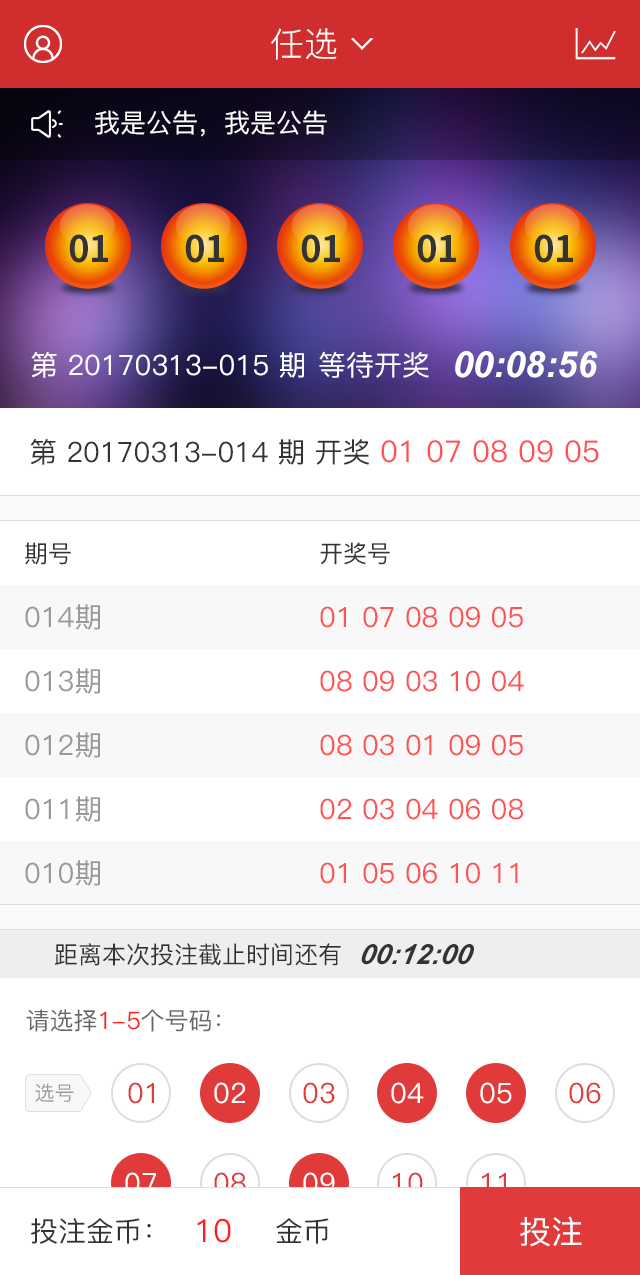
<style>
.page{position:relative;width:640px;height:1275px;background:#ffffff}
.page>*{position:absolute;margin:0}
.t1{font:34px "PingFang-SC-Regular";color:#ffffff}
.t2{font:26px "PingFang-SC-Medium";color:#ffffff}
.t3{font:36.4px "SourceHanSansCN-Bold";color:#333333}
.t4{font:28px "PingFang-SC-Medium";color:#ffffff}
.t5{font:36px "Arial-BoldItalicMT";color:#ffffff}
.t6{font:28px "PingFang-SC-Medium";color:#333333}
.t7{font:30px "PingFang-SC-Medium";color:#ff5252}
.t8{font:24px "PingFang-SC-Medium";color:#333333}
.t9{font:28px "PingFang-SC-Medium";color:#999999}
.t10{font:28px "PingFang-SC-Medium";color:#ff5252}
.t11{font:28px "Arial-BoldItalicMT";color:#333333;font-style:italic}
.t12{font:24px "PingFang-SC-Medium";color:#666666}
.t13{font:24px "PingFang-SC-Medium";color:#ff1f1f}
.t14{font:20px "PingFang-SC-Medium";color:#999999}
.t15{font:28px "PingFang-SC-Medium";color:#e03a3a}
.t16{font:28px "PingFang-SC-Medium";color:#fffefe}
.t17{font:32px "PingFang-SC-Medium";color:#ffffff}
.t18{font:32px "PingFang-SC-Medium";color:#ff1f1f}
</style>
<div class="page">
<p class="t1" style="left:271px;top:28px;width:66px;height:32px">任选</p>
<p class="t2" style="left:95px;top:110px;width:232px;height:27px">我是公告，我是公告</p>
<p class="t3" style="left:69px;top:234px;width:39px;height:29px">01</p>
<p class="t3" style="left:185px;top:234px;width:39px;height:29px">01</p>
<p class="t3" style="left:301px;top:234px;width:39px;height:29px">01</p>
<p class="t3" style="left:417px;top:234px;width:39px;height:29px">01</p>
<p class="t3" style="left:534px;top:234px;width:39px;height:29px">01</p>
<p class="t4" style="left:31px;top:351px;width:398px;height:27px">第 20170313-015 期 等待开奖</p>
<p class="t5" style="left:455px;top:351px;width:143px;height:27px">00:08:56</p>
<p class="t6" style="left:30px;top:439px;width:569px;height:26px">第 20170313-014 期 开奖 <span class="t7">01 07 08 09 05</span></p>
<p class="t8" style="left:25px;top:542px;width:46px;height:23px">期号</p>
<p class="t8" style="left:320px;top:542px;width:70px;height:23px">开奖号</p>
<p class="t9" style="left:25px;top:604px;width:75px;height:26px">014期</p>
<p class="t10" style="left:320px;top:606px;width:203px;height:22px">01 07 08 09 05</p>
<p class="t9" style="left:25px;top:668px;width:75px;height:26px">013期</p>
<p class="t10" style="left:320px;top:670px;width:204px;height:22px">08 09 03 10 04</p>
<p class="t9" style="left:25px;top:732px;width:75px;height:26px">012期</p>
<p class="t10" style="left:320px;top:734px;width:203px;height:22px">08 03 01 09 05</p>
<p class="t9" style="left:25px;top:796px;width:75px;height:26px">011期</p>
<p class="t10" style="left:320px;top:798px;width:203px;height:22px">02 03 04 06 08</p>
<p class="t9" style="left:25px;top:860px;width:75px;height:26px">010期</p>
<p class="t10" style="left:320px;top:862px;width:198px;height:22px">01 05 06 10 11</p>
<p class="t8" style="left:55px;top:943px;width:286px;height:23px">距离本次投注截止时间还有</p>
<p class="t11" style="left:361px;top:944px;width:113px;height:21px">00:12:00</p>
<p class="t12" style="left:26px;top:1009px;width:194px;height:23px">请选择<span class="t13">1-5</span>个号码：</p>
<p class="t14" style="left:35px;top:1083px;width:39px;height:19px">选号</p>
<p class="t15" style="left:128px;top:1082px;width:26px;height:22px">01</p>
<p class="t16" style="left:214px;top:1082px;width:31px;height:22px">02</p>
<p class="t15" style="left:303px;top:1082px;width:32px;height:22px">03</p>
<p class="t4" style="left:391px;top:1082px;width:33px;height:22px">04</p>
<p class="t4" style="left:480px;top:1082px;width:32px;height:22px">05</p>
<p class="t15" style="left:569px;top:1082px;width:32px;height:22px">06</p>
<p class="t4" style="left:125px;top:1172px;width:31px;height:22px">07</p>
<p class="t15" style="left:214px;top:1172px;width:32px;height:22px">08</p>
<p class="t4" style="left:303px;top:1172px;width:32px;height:22px">09</p>
<p class="t15" style="left:393px;top:1172px;width:30px;height:22px">10</p>
<p class="t15" style="left:482px;top:1173px;width:24px;height:20px">11</p>
<p class="t17" style="left:520px;top:1216px;width:62px;height:31px">投注</p>
<p class="t6" style="left:31px;top:1218px;width:120px;height:26px">投注金币：</p>
<p class="t18" style="left:197px;top:1218px;width:34px;height:25px">10</p>
<p class="t6" style="left:276px;top:1218px;width:53px;height:26px">金币</p>
</div>
